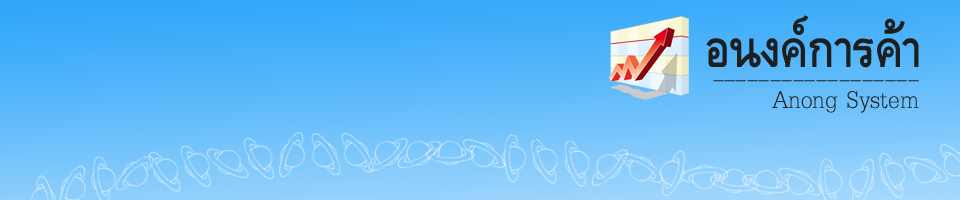
<style>
.page{position:relative;width:960px;height:200px}
.page>*{position:absolute;margin:0}
.t1{font:72px "DilleniaUPCBold";color:#1d1e1e}
.t2{font:36px "DilleniaUPC"}
.t3{font:36px "DilleniaUPC";color:#1d1e1e}
</style>
<div class="page">
<p class="t1" style="left:706px;top:15px;width:213px;height:53px">อนงค์การค้า</p>
<p class="t2" style="left:713px;top:80px;width:206px;height:2px">__________________</p>
<p class="t3" style="left:772px;top:91px;width:147px;height:22px">Anong System</p>
</div>
